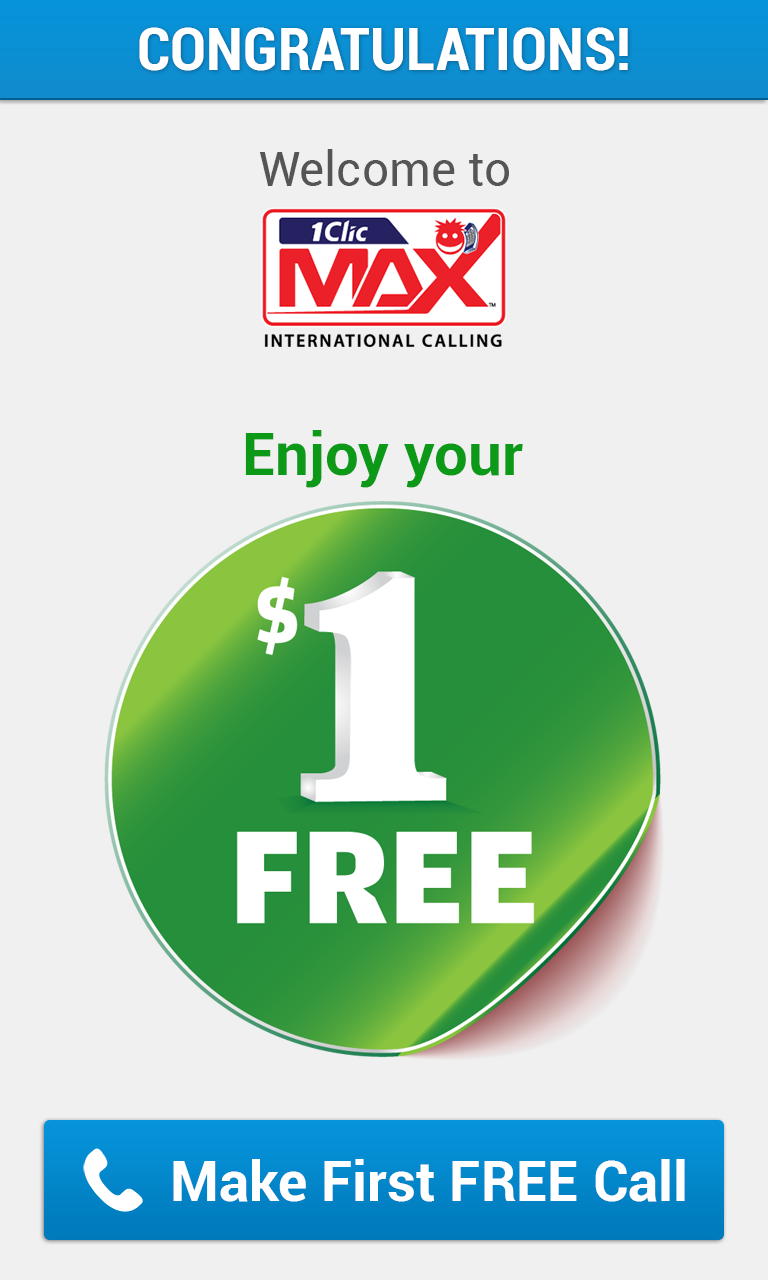
<style>
.page{position:relative;width:768px;height:1280px;background:#f0f0f0}
.page>*{position:absolute;margin:0}
.t1{font:60px "Roboto-BoldCondensed";color:#ffffff}
.t2{font:48px "Roboto-Regular";color:#555555}
.t3{font:60px "Roboto-Bold";color:#0c9918}
.t4{font:56px "Roboto-Bold";color:#ffffff}
</style>
<div class="page">
<p class="t1" style="left:139px;top:27px;width:489px;height:44px">CONGRATULATIONS!</p>
<p class="t2" style="left:259px;top:149px;width:250px;height:37px">Welcome to</p>
<p class="t3" style="left:245px;top:430px;width:278px;height:58px">Enjoy your</p>
<p class="t4" style="left:173px;top:1159px;width:512px;height:43px">Make First FREE Call</p>
</div>
